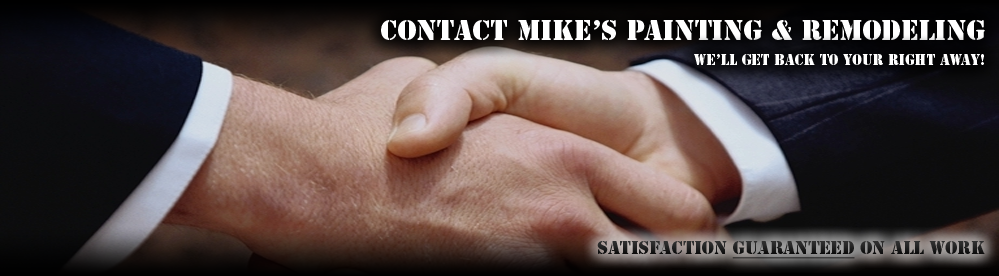
<style>
.page{position:relative;width:999px;height:276px}
.page>*{position:absolute;margin:0}
.t1{font:26.7px "StencilStd";color:#ffffff}
.t2{font:13.8px "StencilStd";color:#ffffff}
.t3{font:17.2px "StencilStd";color:#212121}
.t4{font:17.2px "StencilStd";color:#212121;text-decoration:underline}
</style>
<div class="page">
<p class="t1" style="left:381px;top:20px;width:604px;height:20px">CONTACT MIKE’s PAINTING &amp; REMODELING</p>
<p class="t2" style="left:694px;top:54px;width:290px;height:11px">We’ll Get Back to your Right Away!</p>
<p class="t3" style="left:597px;top:241px;width:388px;height:18px">satisfaction <span class="t4">guaranteed</span> on all work</p>
</div>
